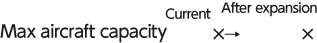
<style>
.page{position:relative;width:317px;height:43px;background:#ffffff}
.page>*{position:absolute;margin:0}
.t1{font:13px "UDShinGoPro-Medium";letter-spacing:-0.04em;color:#1b1b1b}
.t2{font:17px "UDShinGoPro-Medium";letter-spacing:-0.04em;color:#1b1b1b}
</style>
<div class="page">
<p class="t1" style="left:221px;top:2px;width:96px;height:15px">After expansion</p>
<p class="t1" style="left:165px;top:8px;width:46px;height:11px">Current</p>
<p class="t2" style="left:0px;top:23px;width:167px;height:20px">Max aircraft capacity</p>
<p class="t2" style="left:213px;top:28px;width:27px;height:12px">×→</p>
<p class="t2" style="left:302px;top:28px;width:12px;height:12px">×</p>
</div>
